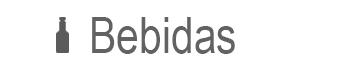
<style>
.page{position:relative;width:353px;height:72px;background:#ffffff}
.page>*{position:absolute;margin:0}
.t1{font:50px "ArialNarrow";color:#626262}
</style>
<div class="page">
<p class="t1" style="left:92px;top:17px;width:143px;height:37px">Bebidas</p>
</div>
